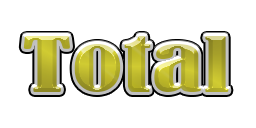
<style>
.page{position:relative;width:256px;height:128px;background:#ffffff}
.page>*{position:absolute;margin:0}
.t1{font:70.8px "BernardMT-Condensed";scale:1.5 1}
</style>
<div class="page">
<p class="t1" style="left:23px;top:36px;width:206px;height:56px">Total</p>
</div>
